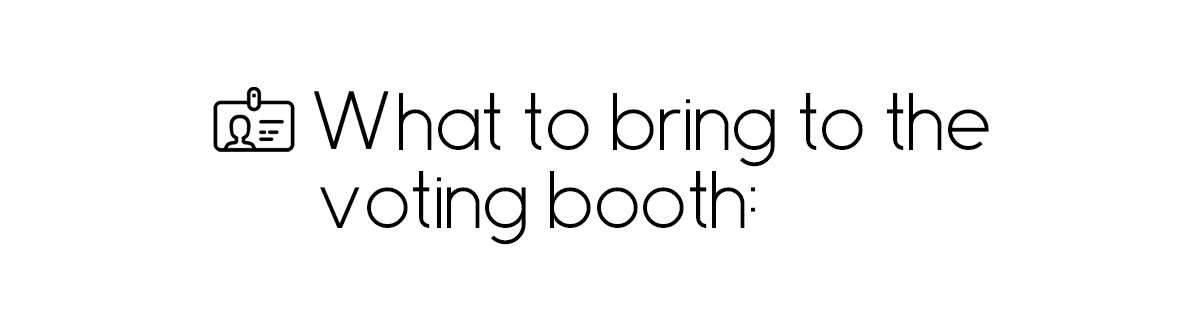
<style>
.page{position:relative;width:1200px;height:315px;background:#ffffff}
.page>*{position:absolute;margin:0}
.t1{font:83.3px "Sanseriffic";letter-spacing:0.001em;color:#000000}
.t2{font:83.3px "Sanseriffic";color:#000000}
</style>
<div class="page">
<p class="t1" style="left:399px;top:93px;width:590px;height:74px">hat to bring to the</p>
<p class="t2" style="left:320px;top:171px;width:435px;height:74px">voting booth:</p>
</div>
